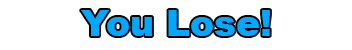
<style>
.page{position:relative;width:352px;height:50px;background:#ffffff}
.page>*{position:absolute;margin:0}
.t1{font:36px "Arial-Black";color:#00a8ff}
</style>
<div class="page">
<p class="t1" style="left:81px;top:10px;width:189px;height:26px">You Lose!</p>
</div>
